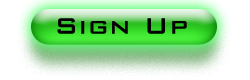
<style>
.page{position:relative;width:250px;height:80px;background:#ffffff}
.page>*{position:absolute;margin:0}
.t1{font:30px "BankGothicBT-Medium";letter-spacing:0.02em;color:#000000}
</style>
<div class="page">
<p class="t1" style="left:57px;top:18px;width:130px;height:16px">Sign Up</p>
</div>
